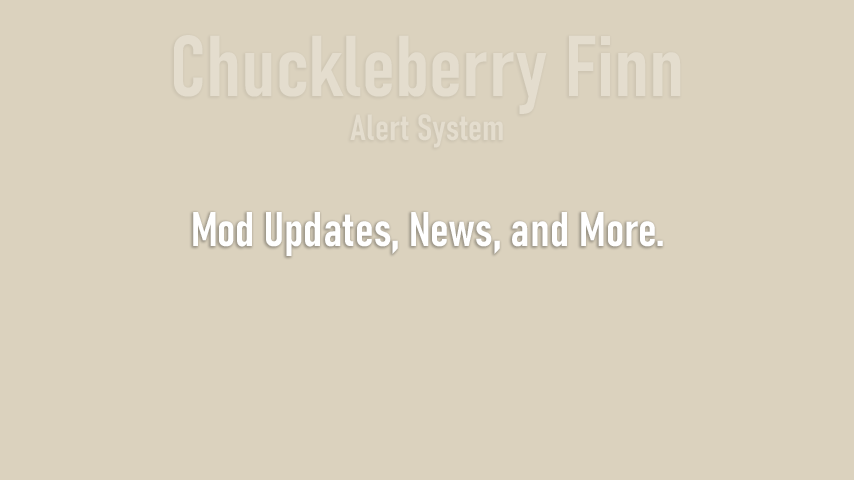
<style>
.page{position:relative;width:854px;height:480px;background:#dbd2be}
.page>*{position:absolute;margin:0}
.t1{font:85px "Bahnschrift-SemiBoldCondensed";color:#e4ddce;font-weight:bold}
.t2{font:36px "Bahnschrift-SemiBoldCondensed";color:#e4ddce;font-weight:bold}
.t3{font:48px "Bahnschrift-SemiBoldCondensed";color:#ffffff;font-weight:bold}
</style>
<div class="page">
<p class="t1" style="left:174px;top:35px;width:507px;height:113px">Chuckleberry Finn <span class="t2">Alert System</span></p>
<p class="t3" style="left:193px;top:212px;width:470px;height:44px">Mod Updates, News, and More.</p>
</div>
